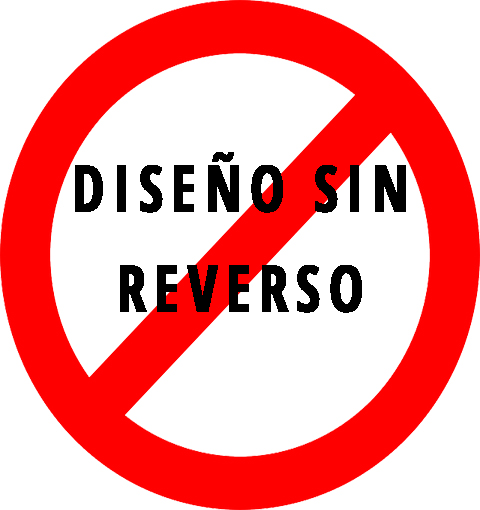
<style>
.page{position:relative;width:480px;height:510px;background:#ffffff}
.page>*{position:absolute;margin:0}
.t1{font:110px "OpenSans-CondensedBold";letter-spacing:0.1em;color:#000000;font-weight:bold;scale:0.91 1}
</style>
<div class="page">
<p class="t1" style="left:75px;top:152px;width:331px;height:161px">DISEÑO SIN REVERSO</p>
</div>
